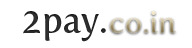
<style>
.page{position:relative;width:192px;height:48px;background:#ffffff}
.page>*{position:absolute;margin:0}
.t1{font:36px "FertigoPro-Regular";color:#2a2a2a}
.t2{font:30px "FertigoPro-Regular"}
</style>
<div class="page">
<p class="t1" style="left:23px;top:11px;width:83px;height:31px">2pay.</p>
<p class="t2" style="left:110px;top:11px;width:66px;height:22px">co.in</p>
</div>
